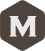
<style>
.page{position:relative;width:45px;height:51px;background:#4e443c}
.page>*{position:absolute;margin:0}
.t1{font:30px "CopperplateGothic-Bold";letter-spacing:0.005em;color:#ebe8e6;font-weight:bold}
</style>
<div class="page">
<p class="t1" style="left:9px;top:16px;width:28px;height:21px">M</p>
</div>
